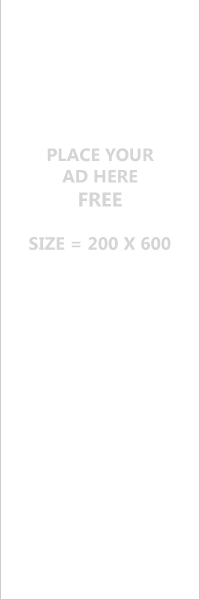
<style>
.page{position:relative;width:200px;height:600px;background:#ffffff}
.page>*{position:absolute;margin:0}
.t1{font:18px "SegoeUI-Bold";color:#d5d5d5}
.t2{font:20px "SegoeUI-Bold";color:#d5d5d5}
</style>
<div class="page">
<p class="t1" style="left:29px;top:148px;width:142px;height:102px;text-align:center">PLACE YOUR<br>AD HERE<br><span class="t2">FREE<br></span><br>SIZE = 200 X 600</p>
</div>
